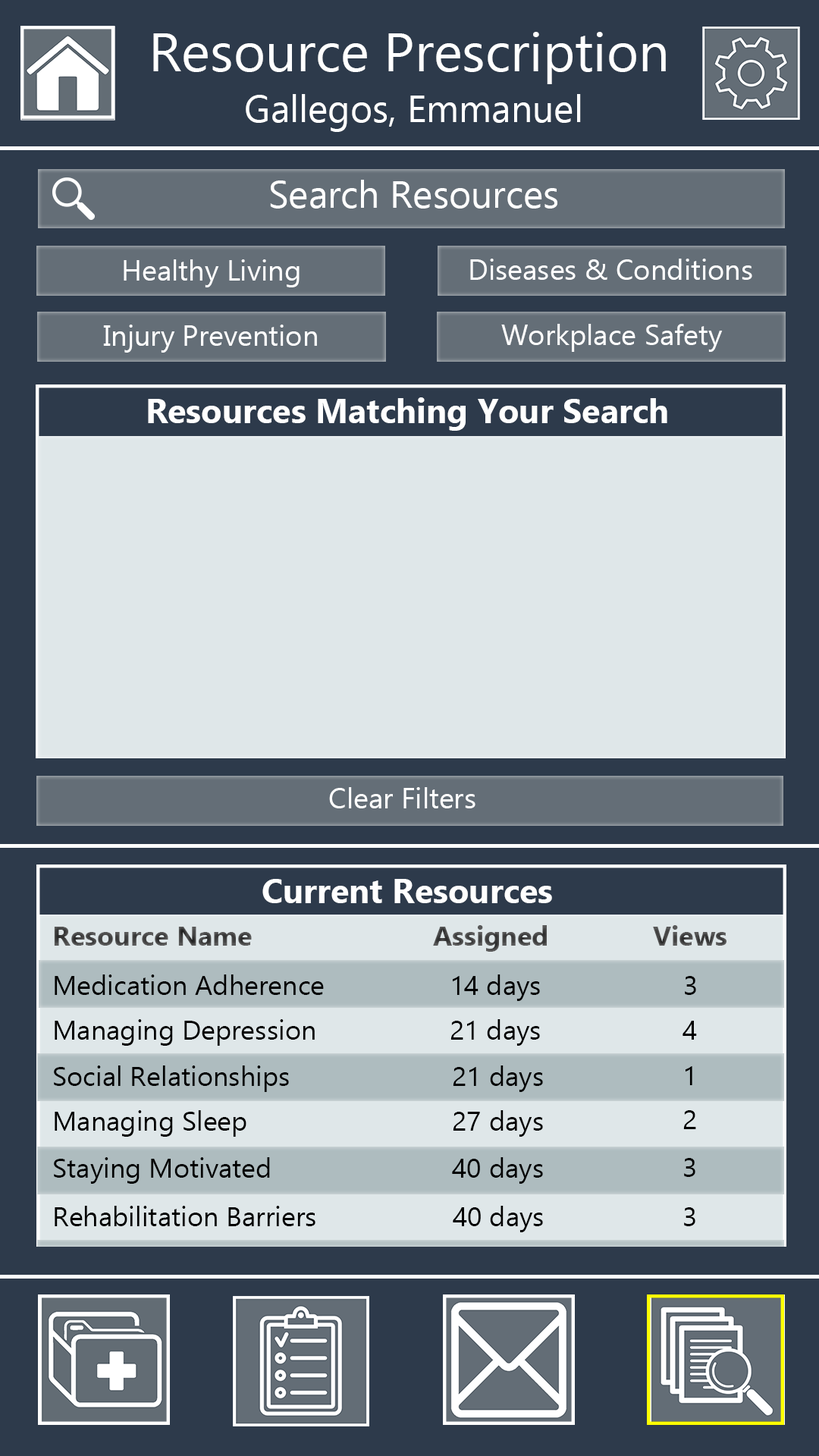
<style>
.page{position:relative;width:819px;height:1456px;background:#2d3a4b}
.page>*{position:absolute;margin:0}
.t1{font:54.6px "Ebrima";color:#ffffff}
.t2{font:37.9px "Ebrima";color:#ffffff}
.t3{font:28.8px "Ebrima";color:#ffffff}
.t4{font:34.1px "Ebrima-Bold";color:#ffffff}
.t5{font:27.3px "Ebrima-Bold";color:#494949}
.t6{font:27.3px "Ebrima";color:#000000}
</style>
<div class="page">
<p class="t1" style="left:153px;top:32px;width:513px;height:52px">Resource Prescription</p>
<p class="t2" style="left:246px;top:94px;width:335px;height:38px">Gallegos, Emmanuel</p>
<p class="t2" style="left:270px;top:180px;width:287px;height:29px">Search Resources</p>
<p class="t3" style="left:124px;top:259px;width:176px;height:28px">Healthy Living</p>
<p class="t3" style="left:470px;top:259px;width:282px;height:21px">Diseases &amp; Conditions</p>
<p class="t3" style="left:103px;top:325px;width:214px;height:28px">Injury Prevention</p>
<p class="t3" style="left:501px;top:324px;width:222px;height:28px">Workplace Safety</p>
<p class="t4" style="left:148px;top:397px;width:519px;height:34px">Resources Matching Your Search</p>
<p class="t3" style="left:329px;top:787px;width:146px;height:21px">Clear Filters</p>
<p class="t4" style="left:262px;top:879px;width:290px;height:24px">Current Resources</p>
<p class="t5" style="left:54px;top:925px;width:672px;height:27px">Resource Name            Assigned    Views</p>
<p class="t6" style="left:55px;top:974px;width:641px;height:27px">Medication Adherence       14 days                   3</p>
<p class="t6" style="left:55px;top:1019px;width:485px;height:27px">Managing Depression       21 days</p>
<p class="t6" style="left:682px;top:1021px;width:15px;height:19px">4</p>
<p class="t6" style="left:54px;top:1065px;width:235px;height:27px">Social Relationships</p>
<p class="t6" style="left:453px;top:1065px;width:90px;height:27px">21 days</p>
<p class="t6" style="left:686px;top:1066px;width:6px;height:19px">1</p>
<p class="t6" style="left:55px;top:1110px;width:191px;height:27px">Managing Sleep</p>
<p class="t6" style="left:453px;top:1110px;width:90px;height:27px">27 days</p>
<p class="t6" style="left:683px;top:1110px;width:13px;height:19px">2</p>
<p class="t6" style="left:54px;top:1157px;width:216px;height:27px">Staying Motivated</p>
<p class="t6" style="left:452px;top:1157px;width:91px;height:27px">40 days</p>
<p class="t6" style="left:684px;top:1158px;width:11px;height:19px">3</p>
<p class="t6" style="left:55px;top:1206px;width:488px;height:26px">Rehabilitation Barriers                  40 days</p>
<p class="t6" style="left:684px;top:1207px;width:11px;height:19px">3</p>
</div>
